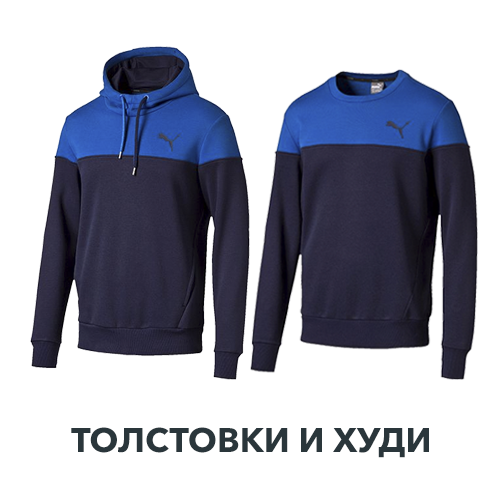
<style>
.page{position:relative;width:500px;height:500px;background:#ffffff}
.page>*{position:absolute;margin:0}
.t1{font:34px "AvenirNextW1G-Bold";color:#2a363b;text-transform:uppercase}
</style>
<div class="page">
<p class="t1" style="left:71px;top:427px;width:358px;height:31px">Толстовки и худи</p>
</div>
